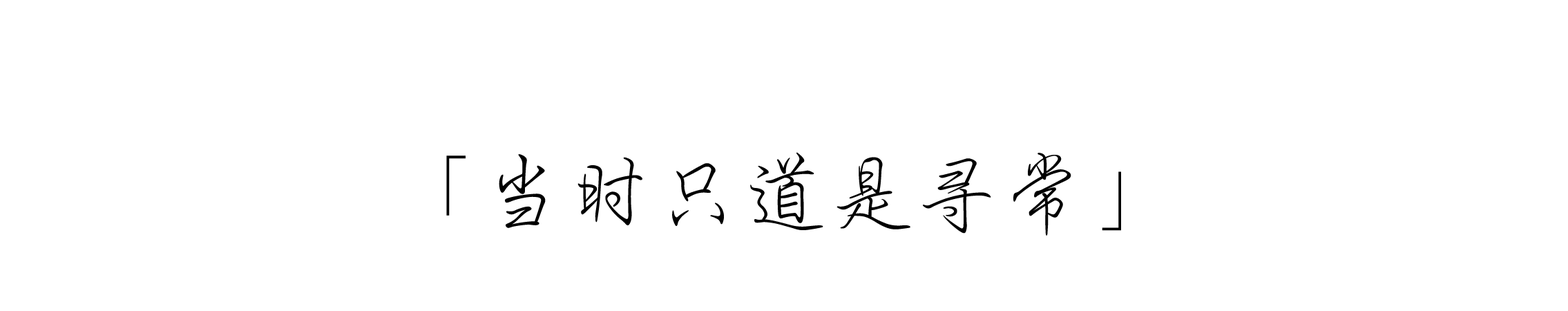
<style>
.page{position:relative;width:1568px;height:311px;background:#ffffff}
.page>*{position:absolute;margin:0}
.t1{font:87px "STXingkaiSC-Light";letter-spacing:0.05em;color:#000000;scale:0.95 1}
</style>
<div class="page">
<p class="t1" style="left:446px;top:152px;width:675px;height:84px">「当时只道是寻常」</p>
</div>
